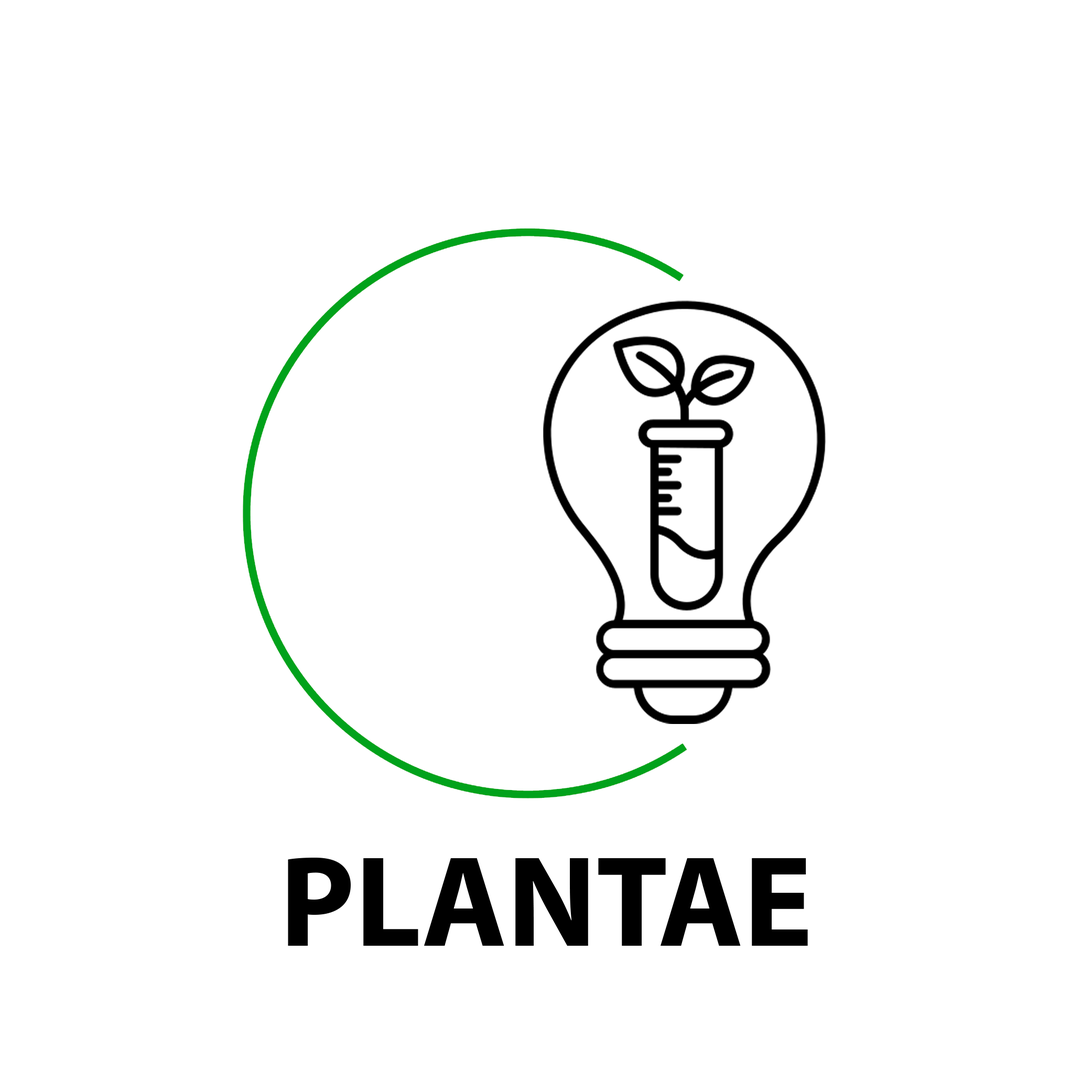
<style>
.page{position:relative;width:1092px;height:1092px;background:#ffffff}
.page>*{position:absolute;margin:0}
.t1{font:129.8px "MyriadPro-Bold";color:#000000}
</style>
<div class="page">
<p class="t1" style="left:288px;top:857px;width:520px;height:89px">PLANTAE</p>
</div>
